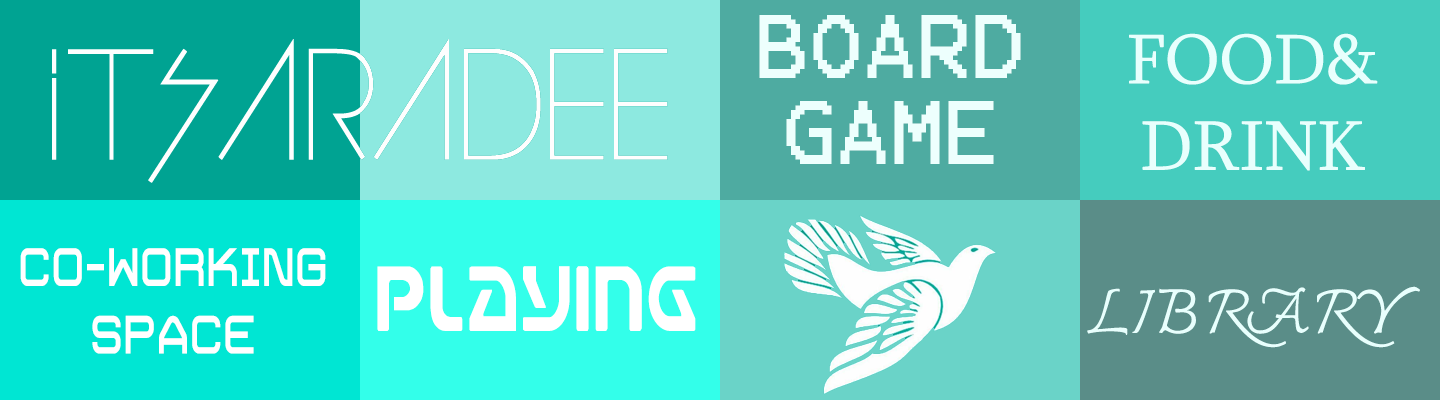
<style>
.page{position:relative;width:1440px;height:400px}
.page>*{position:absolute;margin:0}
.t1{font:72px "Terminal";color:#edfffd}
.t2{font:72px "Sylfaen";color:#e8fffd}
.t3{font:56.3px "Trivial-Regular";color:#ffffff;scale:0.74 1}
.t4{font:91.3px "UniversalJack";color:#ffffff;scale:0.71 1}
.t5{font:72px "THCharmonman";color:#e8fffd}
</style>
<div class="page">
<p class="t1" style="left:759px;top:15px;width:262px;height:149px;text-align:center">BOARD<br>GAME</p>
<p class="t2" style="left:1129px;top:33px;width:249px;height:138px;text-align:center">FOOD&amp;<br>DRINK</p>
<p class="t3" style="left:20px;top:248px;width:306px;height:106px;text-align:center">co-working<br>space</p>
<p class="t4" style="left:377px;top:266px;width:319px;height:65px">Playing</p>
<p class="t5" style="left:1087px;top:286px;width:333px;height:62px">LIBRARY</p>
</div>
